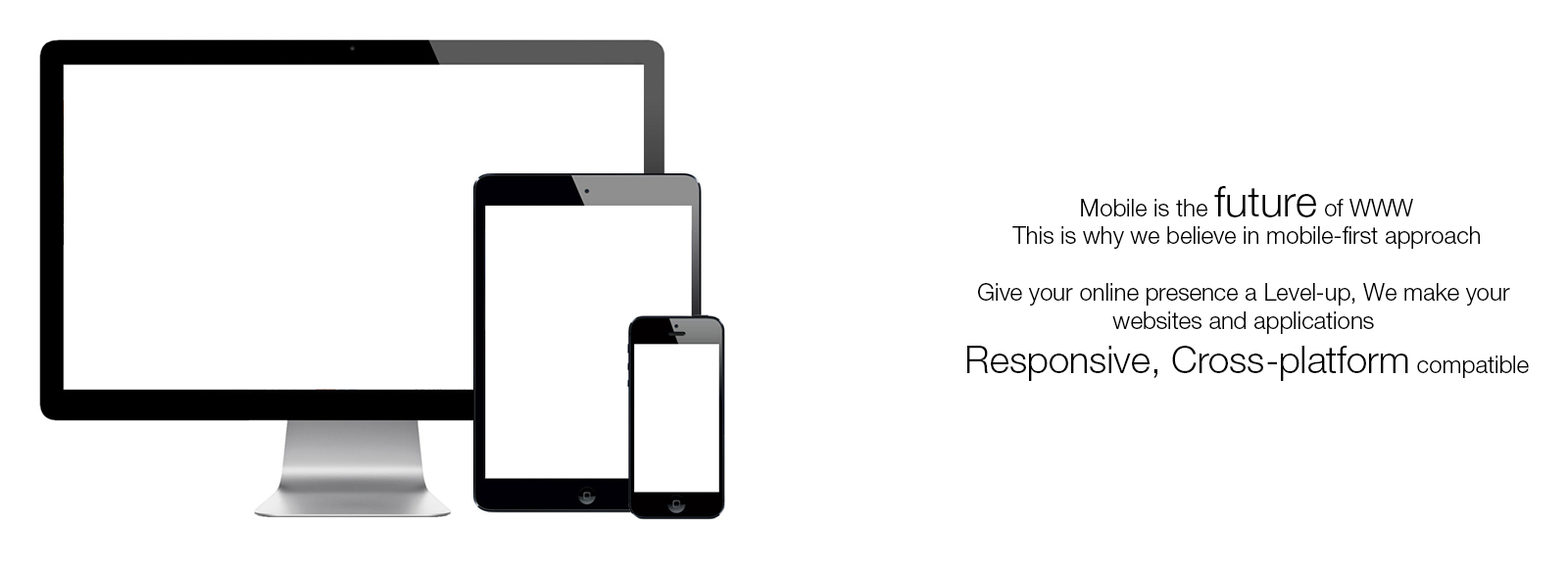
<style>
.page{position:relative;width:1568px;height:568px;background:#ffffff}
.page>*{position:absolute;margin:0}
.t1{font:23.5px "HelveticaNeueLTStd-Lt";color:#000000}
.t2{font:42.1px "HelveticaNeueLTStd-Lt";color:#000000}
.t3{font:37.2px "HelveticaNeueLTStd-Lt";color:#000000}
</style>
<div class="page">
<p class="t1" style="left:967px;top:186px;width:562px;height:195px;text-align:center">Mobile is the <span class="t2">future</span> of WWW<br>This is why we believe in mobile-first approach<br><br>Give your online presence a Level-up, We make your <br>websites and applications <br><span class="t3">Responsive, Cross-platform</span> compatible</p>
</div>
